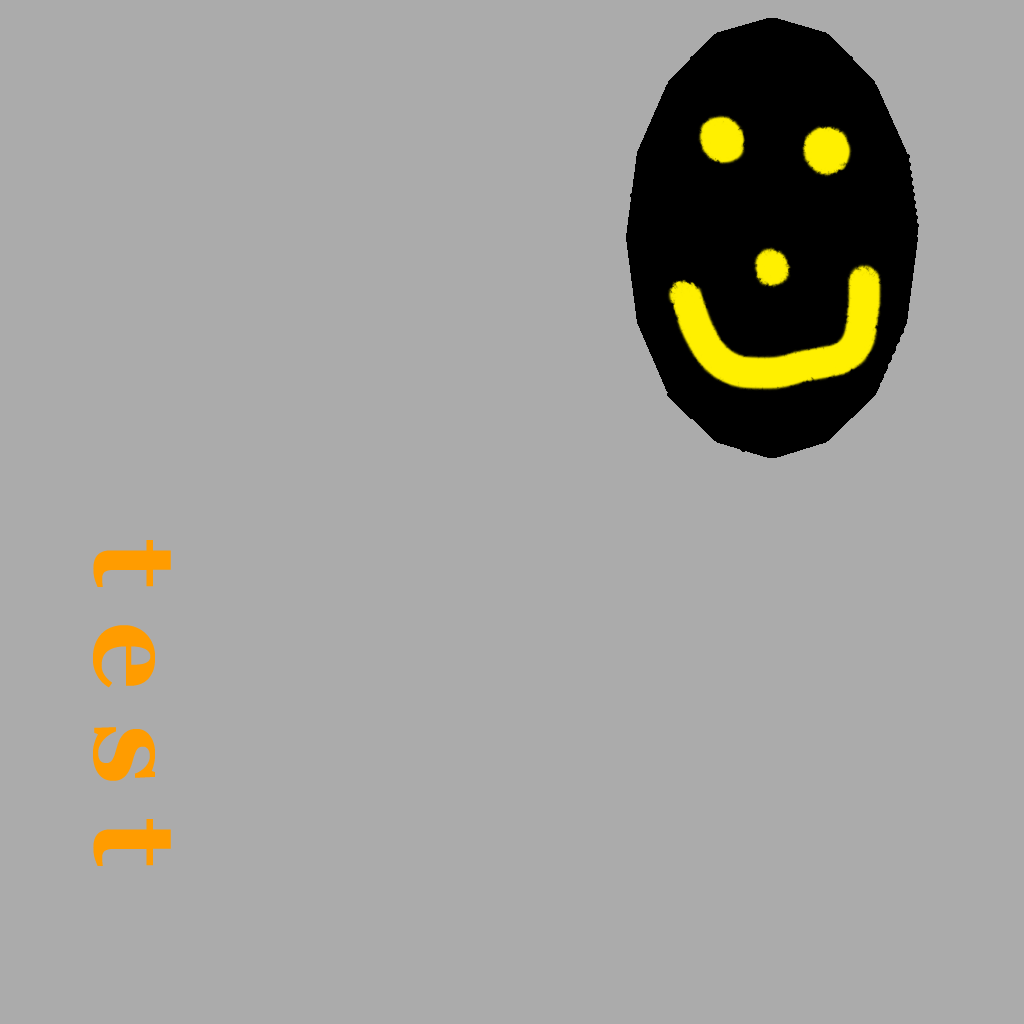
<style>
.page{position:relative;width:1024px;height:1024px;background:#ababab}
.page>*{position:absolute;margin:0}
.t1{font:120px "Georgia-Bold";letter-spacing:0.28em;color:#ff9c00}
</style>
<div class="page">
<p class="t1" style="left:93px;top:540px;width:78px;height:326px;rotate:90deg">test</p>
</div>
